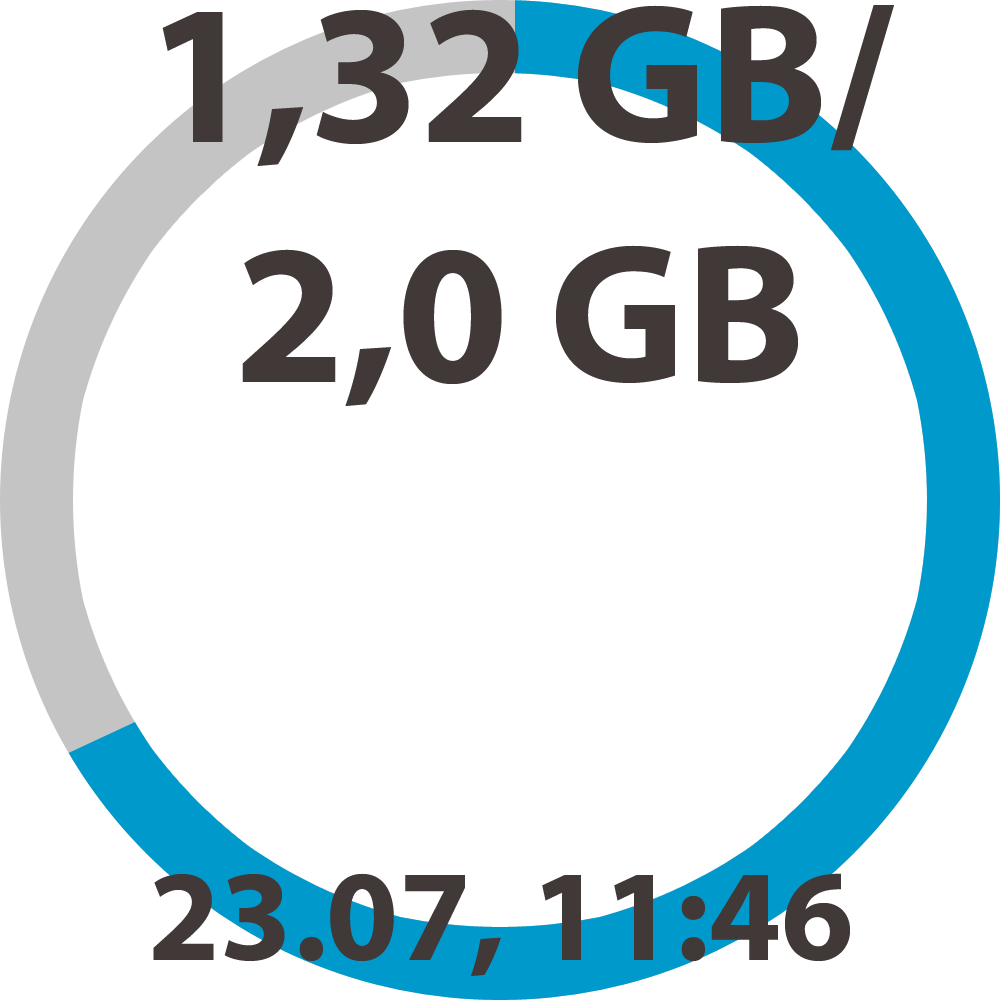
<style>
.page{position:relative;width:1000px;height:1000px;background:#ffffff}
.page>*{position:absolute;margin:0}
.t1{font:200px "MyriadPro-Bold";color:#413838}
.t2{font:130px "MyriadPro-Bold";color:#413838}
</style>
<div class="page">
<p class="t1" style="left:162px;top:5px;width:732px;height:401px;text-align:center">1,32 GB/<br>2,0 GB</p>
<p class="t2" style="left:153px;top:873px;width:697px;height:103px">23.07, 11:46</p>
</div>
